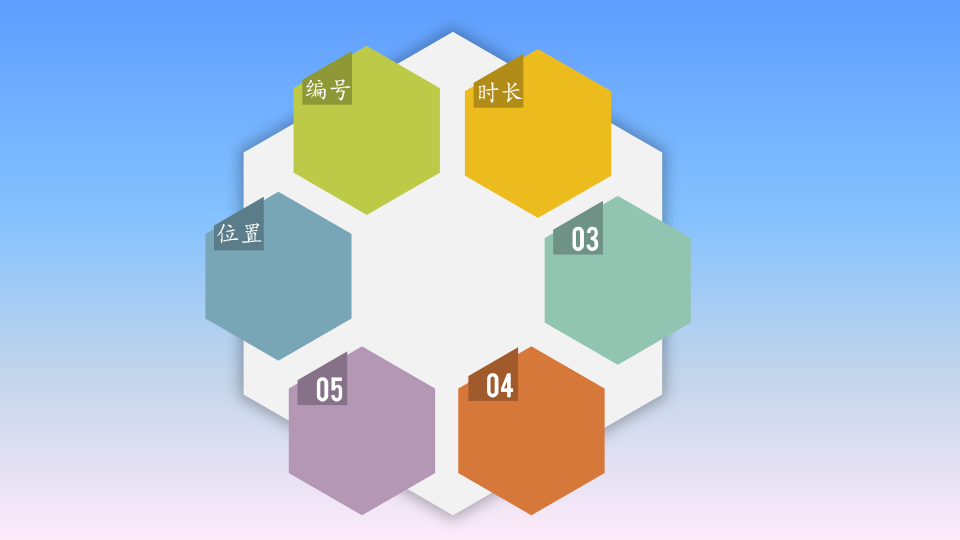
<style>
.page{position:relative;width:960px;height:540px}
.page>*{position:absolute;margin:0}
.t1{font:24px "¿¬Ìå-Regular";color:#ffffff}
</style>
<div class="page">
<p class="t1" style="left:306px;top:79px;width:45px;height:22px">编号</p>
<p class="t1" style="left:478px;top:82px;width:45px;height:21px">时长</p>
<p class="t1" style="left:217px;top:223px;width:45px;height:21px">位置</p>
</div>
